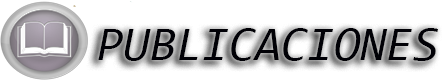
<style>
.page{position:relative;width:443px;height:80px;background:#ffffff}
.page>*{position:absolute;margin:0}
.t1{font:47.9px "Consolas-Italic";color:#010106}
</style>
<div class="page">
<p class="t1" style="left:98px;top:28px;width:340px;height:33px">PUBLICACIONES</p>
</div>
